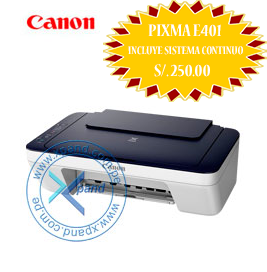
<style>
.page{position:relative;width:267px;height:272px;background:#ffffff}
.page>*{position:absolute;margin:0}
.t1{font:18.7px "NuevaStd-BoldCond";color:#ffffff}
.t2{font:12px "NuevaStd-BoldCond";color:#ffffff}
</style>
<div class="page">
<p class="t1" style="left:148px;top:24px;width:73px;height:13px">PIXMA E401</p>
<p class="t2" style="left:128px;top:46px;width:115px;height:9px">INCLUYE SISTEMA CONTINUO</p>
<p class="t1" style="left:154px;top:64px;width:56px;height:13px">S/. 250.00</p>
</div>
